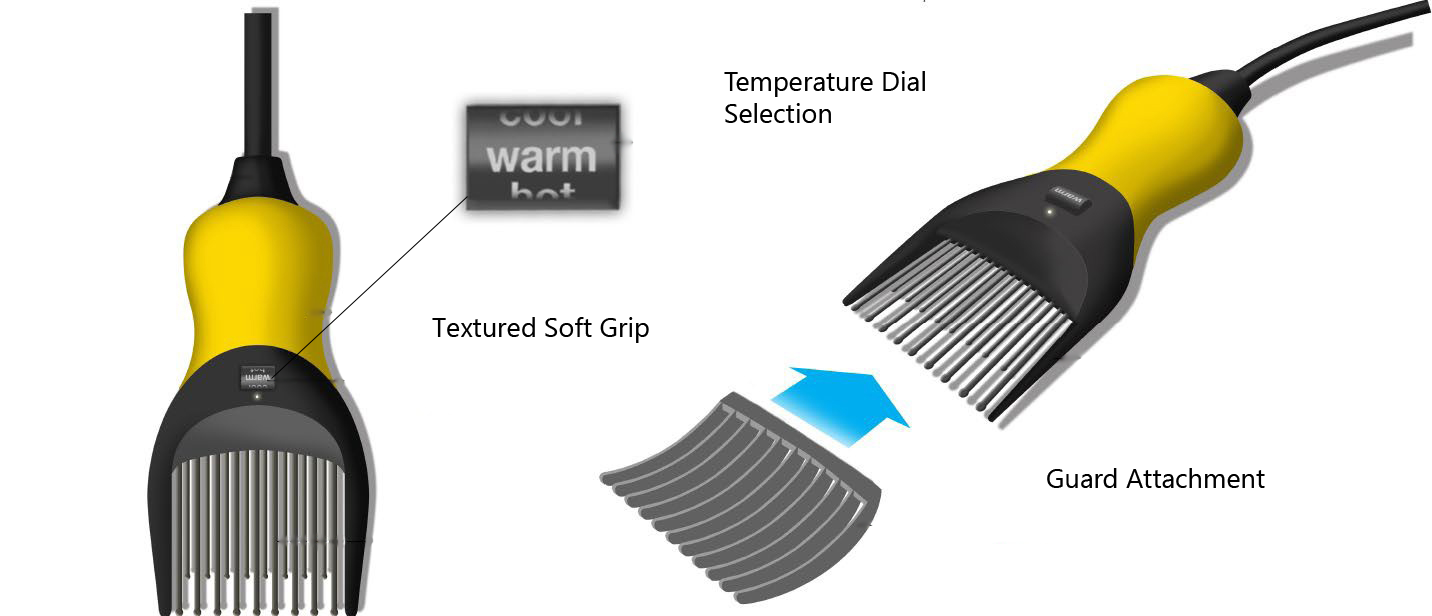
<style>
.page{position:relative;width:1432px;height:616px;background:#ffffff}
.page>*{position:absolute;margin:0}
.t1{font:27.1px "NirmalaUI";color:#000000}
</style>
<div class="page">
<p class="t1" style="left:724px;top:71px;width:201px;height:52px">Temperature Dial <br>Selection</p>
<p class="t1" style="left:432px;top:317px;width:217px;height:26px">Textured Soft Grip</p>
<p class="t1" style="left:1047px;top:468px;width:218px;height:20px">Guard Attachment</p>
</div>
